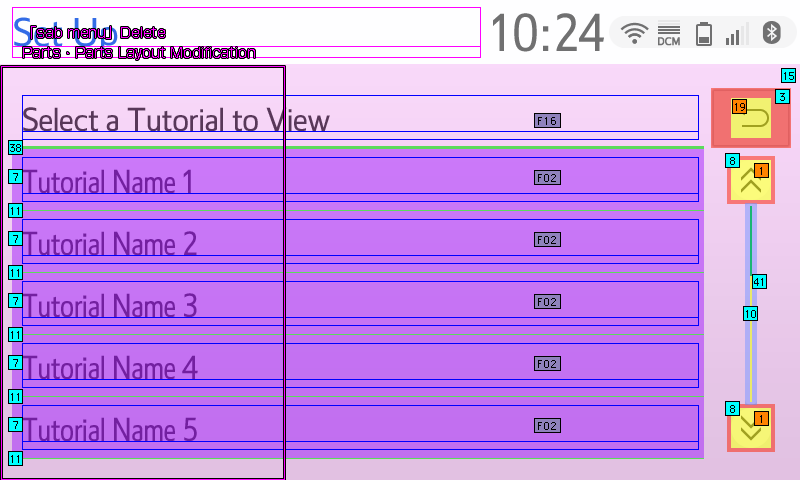
<style>
.page{position:relative;width:800px;height:480px}
.page>*{position:absolute;margin:0}
.t1{font:36px "Tfont1502_T1S"}
.t2{font:48px "Tfont1502_T2S";letter-spacing:0.05em;color:#707071}
.t3{font:14px/20px "ShinGoPro-Regular";color:#ff00ff}
.t4{font:30px "Tfont1502_T1S";color:#583859}
.t5{font:30px/62px "Tfont1502_T2S";color:#7320a0}
</style>
<div class="page">
<p class="t1" style="left:14px;top:17px;width:104px;height:37px">Set Up</p>
<p class="t2" style="left:493px;top:13px;width:111px;height:39px">10:24</p>
<p class="t3" style="left:23px;top:26px;width:232px;height:34px">「sab menu」Delete<br>Parts・Parts Layout Modification</p>
<p class="t4" style="left:23px;top:107px;width:307px;height:25px">Select a Tutorial to View</p>
<p class="t5" style="left:22px;top:169px;width:176px;height:273px">Tutorial Name 1<br>Tutorial Name 2<br>Tutorial Name 3<br>Tutorial Name 4<br>Tutorial Name 5</p>
</div>
